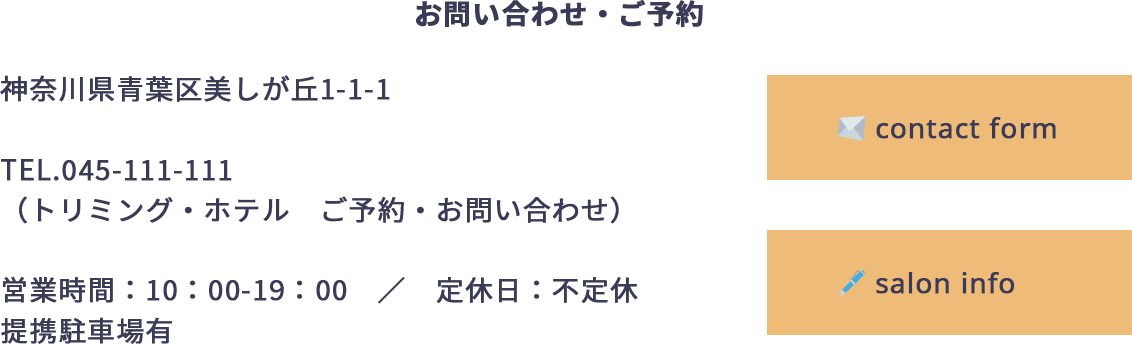
<style>
.page{position:relative;width:1132px;height:344px;background:#ffffff}
.page>*{position:absolute;margin:0}
.t1{font:27.6px "NotoSansJP-Bold";letter-spacing:0.025em;color:#393b57;font-weight:bold}
.t2{font:27.6px "NotoSansJP-Regular";letter-spacing:0.025em;color:#393b57;font-weight:bold}
.t3{font:27.6px "NotoSans";letter-spacing:0.025em;color:#393b57;font-weight:bold}
.t4{font:27.6px "EmojiOneColor";letter-spacing:0.025em;color:#393b57;font-weight:bold}
</style>
<div class="page">
<p class="t1" style="left:416px;top:0px;width:287px;height:27px">お問い合わせ・ご予約</p>
<p class="t2" style="left:0px;top:75px;width:638px;height:269px">神奈川県青葉区美しが丘1-1-1<br><br>TEL.045-111-111<br>（トリミング・ホテル　ご予約・お問い合わせ）<br><br>営業時間：10：00-19：00　／　定休日：不定休<br>提携駐車場有</p>
<p class="t3" style="left:838px;top:116px;width:218px;height:25px"><span class="t4">✉ </span>contact form</p>
</div>
